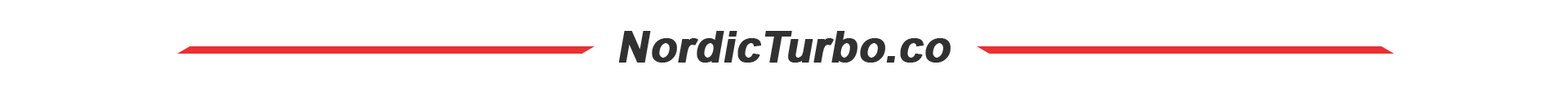
<style>
.page{position:relative;width:1568px;height:91px;background:#ffffff}
.page>*{position:absolute;margin:0}
.t1{font:42.9px "Arial-BoldMT";color:#313131;font-weight:bold;font-style:italic}
</style>
<div class="page">
<p class="t1" style="left:619px;top:31px;width:332px;height:32px">NordicTurbo.co</p>
</div>
